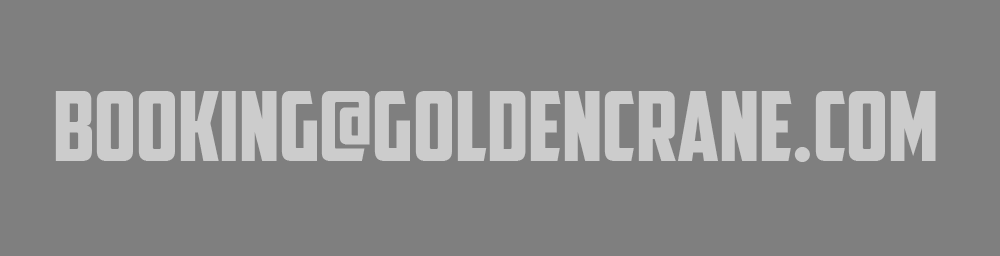
<style>
.page{position:relative;width:1000px;height:256px;background:#7f7f7f}
.page>*{position:absolute;margin:0}
.t1{font:95.5px "AmericanCaptain";color:#cccccc}
</style>
<div class="page">
<p class="t1" style="left:55px;top:91px;width:881px;height:71px">BOOKING@goldencrane.com</p>
</div>
